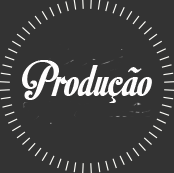
<style>
.page{position:relative;width:174px;height:173px;background:#333333}
.page>*{position:absolute;margin:0}
.t1{font:50px "MotionPicturePersonalUse";color:#fefdfd}
</style>
<div class="page">
<p class="t1" style="left:22px;top:60px;width:130px;height:43px">Produção</p>
</div>
